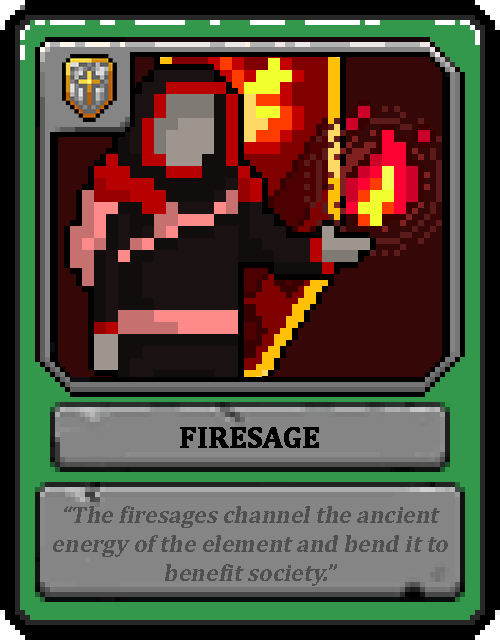
<style>
.page{position:relative;width:500px;height:640px}
.page>*{position:absolute;margin:0}
.t1{font:30px "Cambria-Bold";color:#000000;text-transform:uppercase;font-weight:bold}
.t2{font:24px "Cambria-Bold";color:#505050;font-style:italic}
</style>
<div class="page">
<p class="t1" style="left:180px;top:427px;width:139px;height:21px">Firesage</p>
<p class="t2" style="left:53px;top:506px;width:395px;height:80px;text-align:center">“The firesages channel the ancient energy of the element and bend it to benefit society.”</p>
</div>
